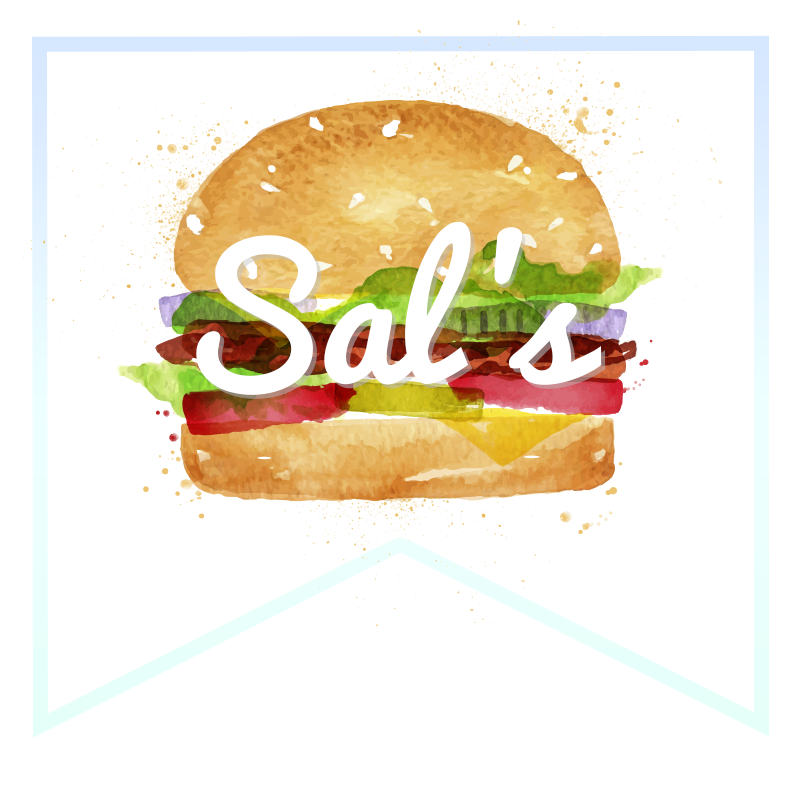
<style>
.page{position:relative;width:800px;height:800px;background:#ffffff}
.page>*{position:absolute;margin:0}
.t1{font:173.2px "Pacifico-Regular";color:#ffffff}
.t2{font:173.2px "Pacifico-Regular";letter-spacing:0.2em;color:#ffffff}
.t3{font:173.2px "Pacifico-Regular";letter-spacing:-0.15em;color:#ffffff}
</style>
<div class="page">
<p class="t1" style="left:196px;top:221px;width:406px;height:174px">Sa<span class="t2">l</span><span class="t3">’</span>s</p>
<p class="t1" style="left:200px;top:225px;width:406px;height:174px">Sa<span class="t2">l</span><span class="t3">’</span>s</p>
</div>
